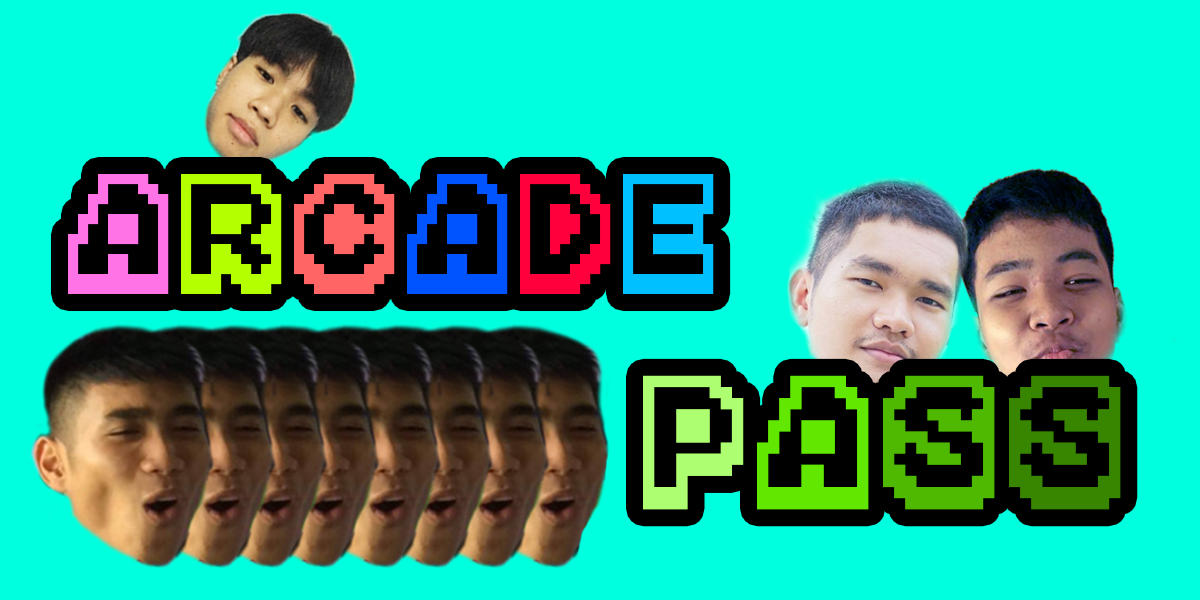
<style>
.page{position:relative;width:1200px;height:600px;background:#00ffde}
.page>*{position:absolute;margin:0}
.t1{font:160px "Mario-Kart-DS"}
.t2{font:177.8px "Mario-Kart-DS"}
.t3{font:160px "Mario-Kart-DS";color:#ff73e6}
.t4{font:160px "Mario-Kart-DS";color:#b4ff00}
.t5{font:160px "Mario-Kart-DS";color:#ff6565}
.t6{font:160px "Mario-Kart-DS";color:#0054ff}
.t7{font:160px "Mario-Kart-DS";color:#ff003c}
.t8{font:160px "Mario-Kart-DS";color:#00c0ff}
.t9{font:177.8px "Mario-Kart-DS";color:#adff71}
.t10{font:177.8px "Mario-Kart-DS";color:#62e800}
.t11{font:177.8px "Mario-Kart-DS";color:#4eb900}
.t12{font:177.8px "Mario-Kart-DS";color:#388500}
</style>
<div class="page">
<p class="t1" style="left:68px;top:174px;width:1053px;height:336px;text-align:right">ARCADE <br>                         <span class="t2">P</span><span class="t2">A</span><span class="t2">S</span><span class="t2">S</span></p>
<p class="t3" style="left:68px;top:174px;width:1053px;height:336px;text-align:right">A<span class="t4">R</span><span class="t5">C</span><span class="t6">A</span><span class="t7">D</span><span class="t8">E <br>                         </span><span class="t9">P</span><span class="t10">A</span><span class="t11">S</span><span class="t12">S</span></p>
</div>
